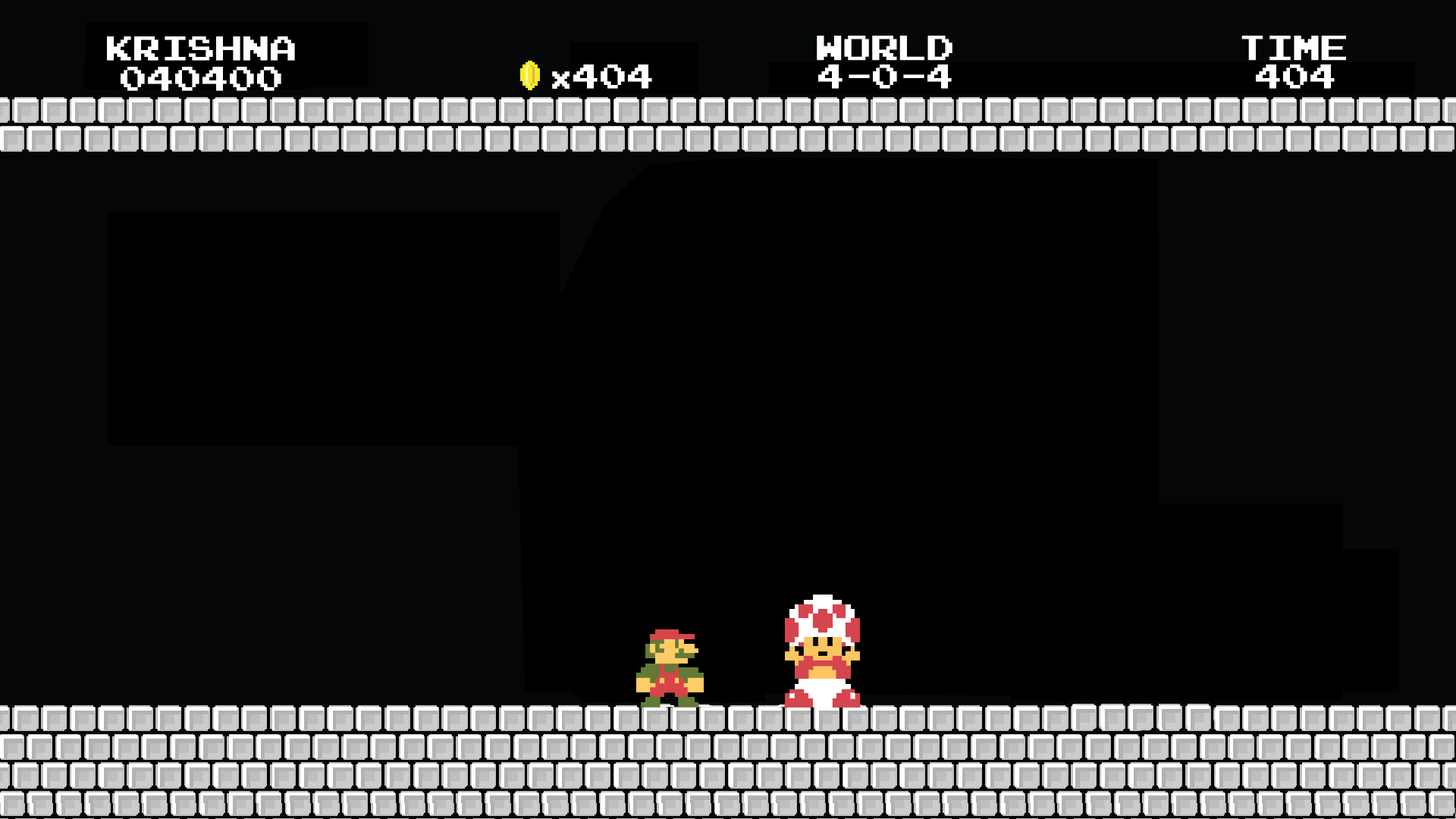
<style>
.page{position:relative;width:1456px;height:819px;background:#000000}
.page>*{position:absolute;margin:0}
.t1{font:27.3px/30.3px "PressStart2P";color:#ffffff}
.t2{font:27.3px "PressStart2P";color:#ffffff}
</style>
<div class="page">
<p class="t1" style="left:107px;top:36px;width:188px;height:55px;text-align:center">KRISHNA<br>040400</p>
<p class="t2" style="left:573px;top:64px;width:79px;height:25px">404</p>
<p class="t2" style="left:818px;top:64px;width:134px;height:25px">4-0-4</p>
<p class="t2" style="left:1256px;top:64px;width:79px;height:25px">404</p>
</div>
